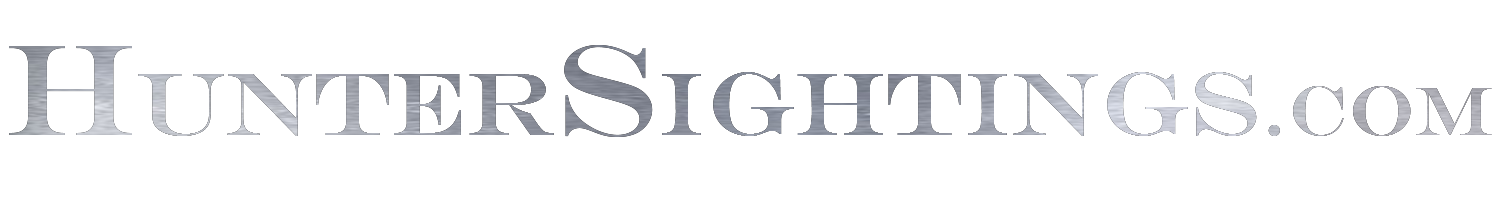
<style>
.page{position:relative;width:1500px;height:200px;background:#ffffff}
.page>*{position:absolute;margin:0}
.t1{font:90px "EngraversMT"}
.t2{font:130px "EngraversMT"}
.t3{font:70px "EngraversMT"}
</style>
<div class="page">
<p class="t1" style="left:9px;top:45px;width:1483px;height:92px"><span class="t2">H</span>unter<span class="t2">S</span>ightings<span class="t3">.com</span></p>
</div>
